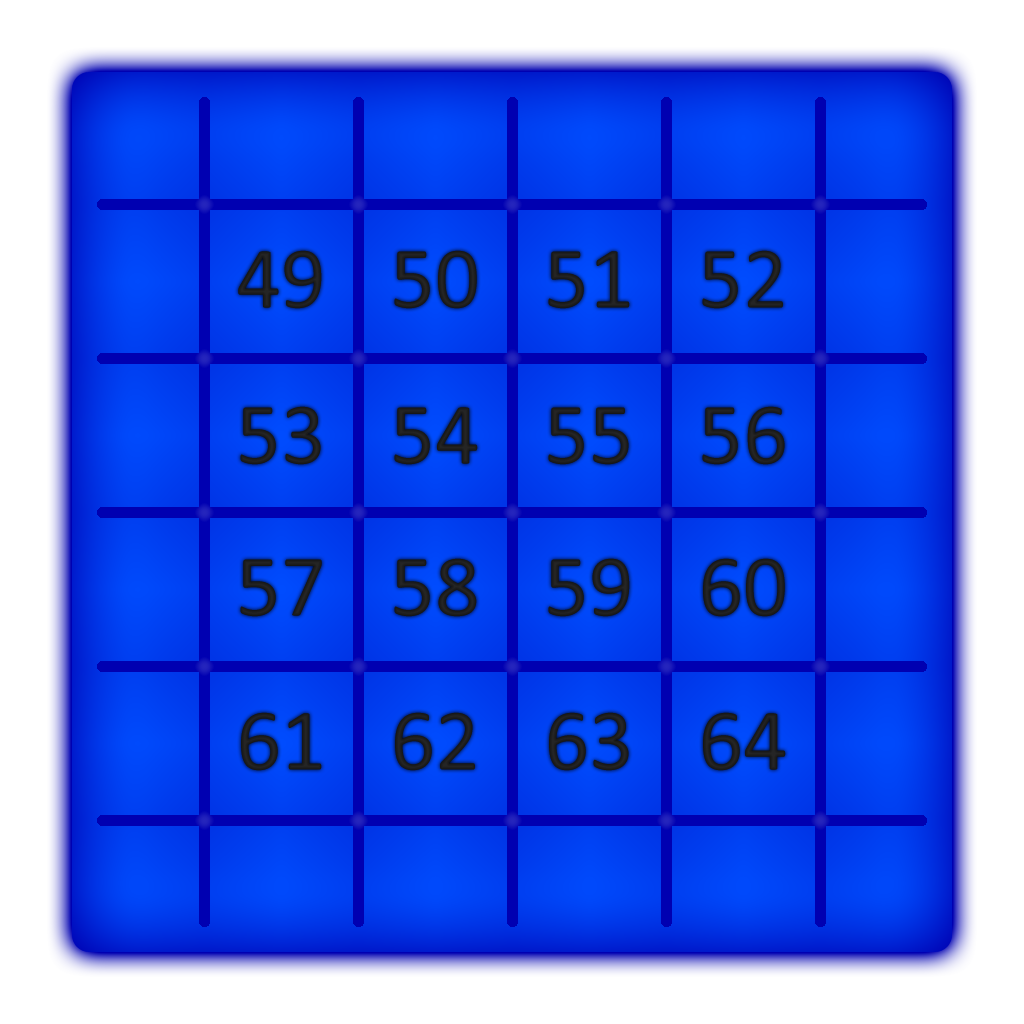
<style>
.page{position:relative;width:1024px;height:1024px}
.page>*{position:absolute;margin:0}
.t1{font:88.5px "Calibri";color:#1e1e1e}
.t2{font:88.5px "Calibri";color:#1d1d1d}
</style>
<div class="page">
<p class="t1" style="left:238px;top:250px;width:84px;height:59px">49</p>
<p class="t1" style="left:394px;top:250px;width:83px;height:59px">50</p>
<p class="t1" style="left:548px;top:251px;width:82px;height:58px">51</p>
<p class="t1" style="left:702px;top:250px;width:81px;height:59px">52</p>
<p class="t2" style="left:240px;top:406px;width:81px;height:59px">53</p>
<p class="t1" style="left:394px;top:407px;width:84px;height:58px">54</p>
<p class="t1" style="left:548px;top:407px;width:81px;height:58px">55</p>
<p class="t1" style="left:702px;top:406px;width:83px;height:59px">56</p>
<p class="t1" style="left:394px;top:558px;width:83px;height:59px">58</p>
<p class="t1" style="left:548px;top:558px;width:82px;height:59px">59</p>
<p class="t1" style="left:703px;top:558px;width:82px;height:59px">60</p>
<p class="t1" style="left:240px;top:559px;width:82px;height:58px">57</p>
<p class="t1" style="left:241px;top:712px;width:81px;height:59px">61</p>
<p class="t1" style="left:395px;top:712px;width:80px;height:59px">62</p>
<p class="t2" style="left:549px;top:712px;width:80px;height:59px">63</p>
<p class="t2" style="left:703px;top:712px;width:83px;height:59px">64</p>
</div>
